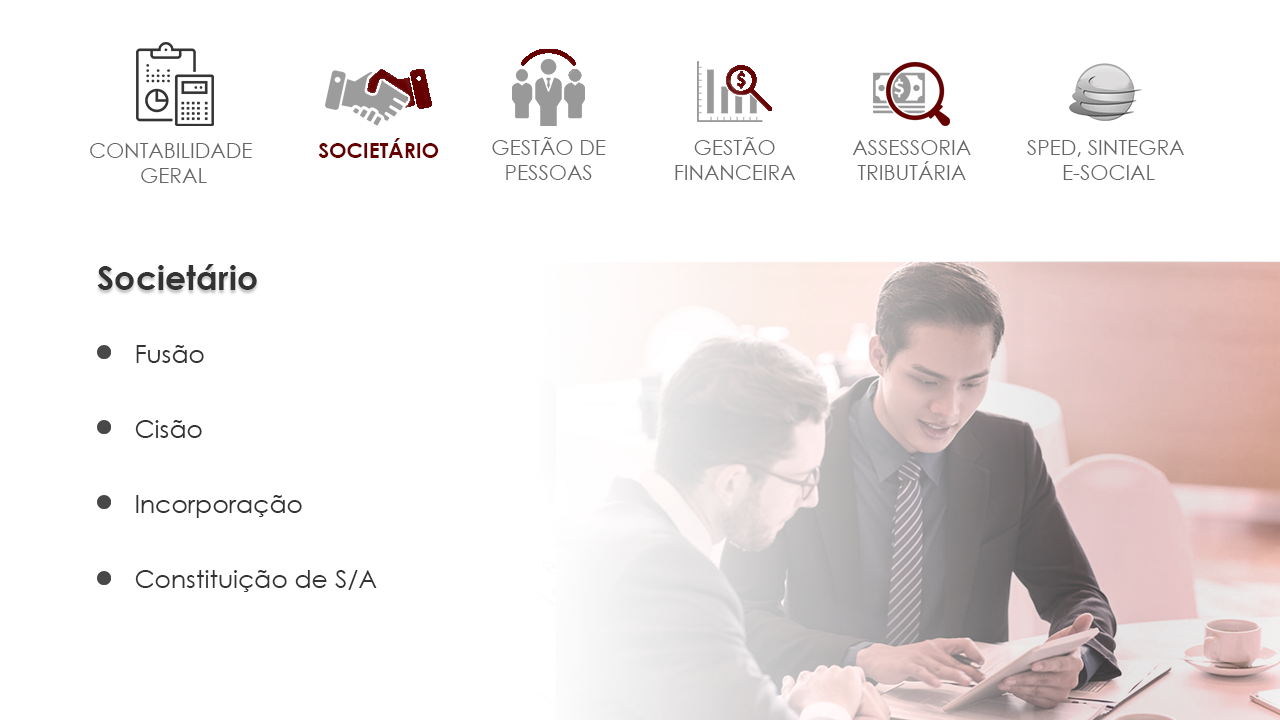
<style>
.page{position:relative;width:1280px;height:720px;background:#ffffff}
.page>*{position:absolute;margin:0}
.t1{font:20.8px/25px "CenturyGothic";color:#666666}
.t2{font:20.8px "CenturyGothic-Bold";color:#660000}
.t3{font:33.3px "CenturyGothic-Bold";color:#333333}
.t4{font:25px/25px "CenturyGothic";color:#333333}
</style>
<div class="page">
<p class="t1" style="left:492px;top:137px;width:114px;height:43px;text-align:center">GESTÃO DE <br>PESSOAS</p>
<p class="t1" style="left:675px;top:137px;width:121px;height:43px;text-align:center">GESTÃO<br>FINANCEIRA</p>
<p class="t1" style="left:90px;top:143px;width:162px;height:40px;text-align:center">CONTABILIDADE<br> GERAL</p>
<p class="t2" style="left:318px;top:138px;width:121px;height:20px">SOCIETÁRIO</p>
<p class="t1" style="left:852px;top:140px;width:119px;height:40px;text-align:center">ASSESSORIA<br>TRIBUTÁRIA</p>
<p class="t1" style="left:1027px;top:140px;width:157px;height:40px;text-align:center">SPED, SINTEGRA<br> E-SOCIAL</p>
<p class="t3" style="left:97px;top:264px;width:160px;height:26px">Societário</p>
<p class="t4" style="left:135px;top:345px;width:242px;height:247px">Fusão<br><br><br>Cisão<br><br><br>Incorporação<br><br><br>Constituição de S/A</p>
</div>
